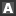
<style>
.page{position:relative;width:16px;height:16px;background:#333333}
.page>*{position:absolute;margin:0}
.t1{font:13px "Arial-Black";letter-spacing:-0.06em;color:#ffffff}
</style>
<div class="page">
<p class="t1" style="left:3px;top:3px;width:10px;height:10px">A</p>
</div>
